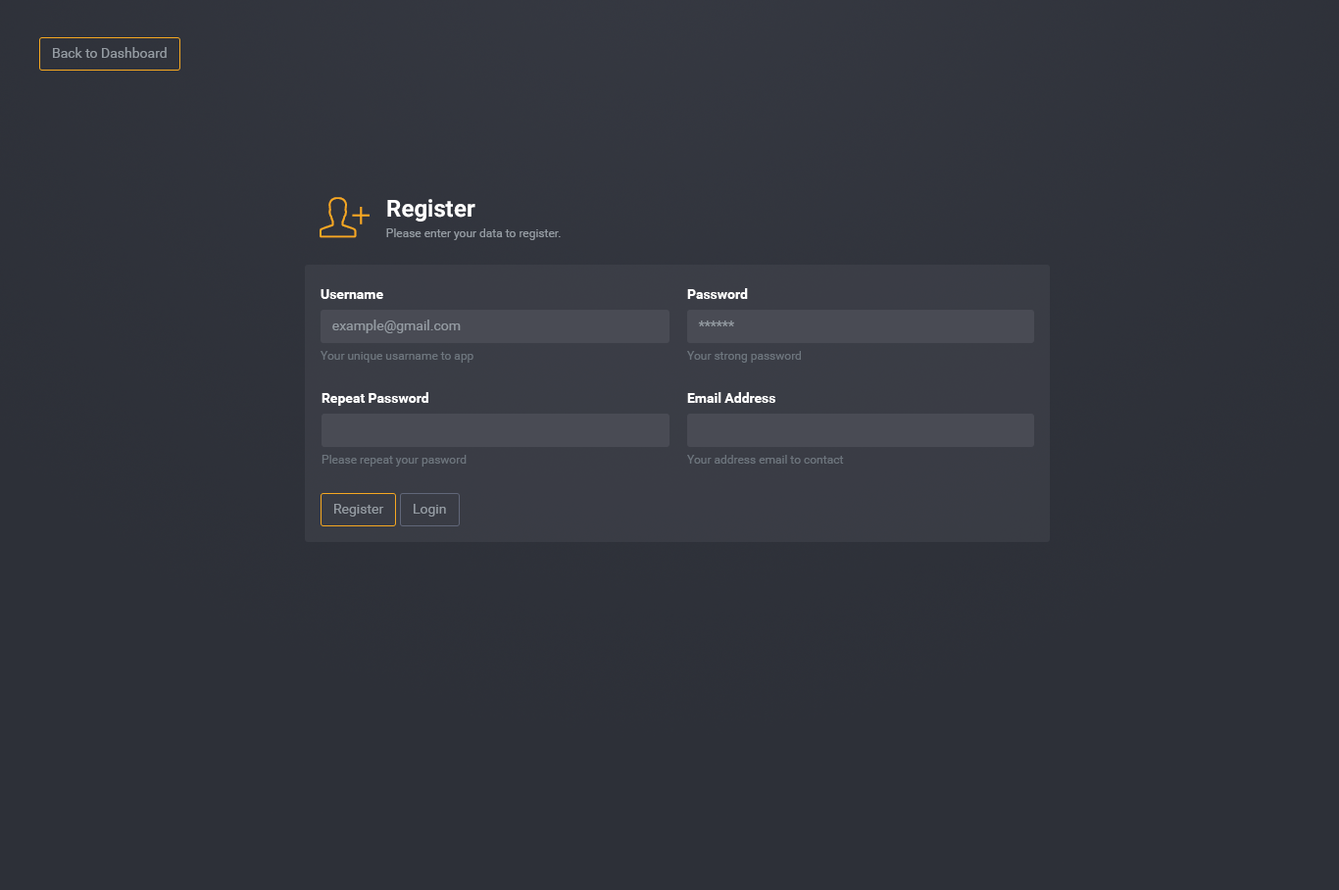
<style>
.page{position:relative;width:1339px;height:890px;background:#2d3038}
.page>*{position:absolute;margin:0}
.t1{font:13.7px "Roboto-Regular";color:#949ba2}
.t2{font:23.5px "Roboto-Bold";color:#ffffff}
.t3{font:11.8px "Roboto-Regular";color:#949ba2}
.t4{font:13.7px "Roboto-Bold";color:#ffffff}
.t5{font:11.8px "Roboto-Regular";color:#6d757d}
</style>
<div class="page">
<p class="t1" style="left:53px;top:47px;width:114px;height:11px">Back to Dashboard</p>
<p class="t2" style="left:387px;top:199px;width:89px;height:23px">Register</p>
<p class="t3" style="left:386px;top:228px;width:175px;height:12px">Please enter your data to register.</p>
<p class="t4" style="left:321px;top:289px;width:62px;height:10px">Username</p>
<p class="t4" style="left:687px;top:288px;width:61px;height:11px">Password</p>
<p class="t1" style="left:332px;top:320px;width:129px;height:13px">example@gmail.com</p>
<p class="t1" style="left:698px;top:321px;width:36px;height:6px">******</p>
<p class="t5" style="left:321px;top:351px;width:153px;height:12px">Your unique usarname to app</p>
<p class="t5" style="left:687px;top:351px;width:114px;height:12px">Your strong password</p>
<p class="t4" style="left:322px;top:392px;width:106px;height:14px">Repeat Password</p>
<p class="t4" style="left:687px;top:392px;width:89px;height:11px">Email Address</p>
<p class="t5" style="left:322px;top:455px;width:145px;height:12px">Please repeat your pasword</p>
<p class="t5" style="left:687px;top:455px;width:157px;height:9px">Your address email to contact</p>
<p class="t1" style="left:334px;top:504px;width:50px;height:13px">Register</p>
<p class="t1" style="left:414px;top:504px;width:32px;height:13px">Login</p>
</div>
